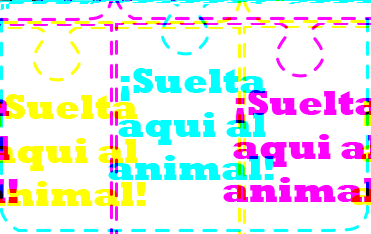
<style>
.page{position:relative;width:371px;height:234px;background:#ffffff}
.page>*{position:absolute;margin:0}
.t1{font:36px "Rockwell-ExtraBold";color:#00ffff}
</style>
<div class="page">
<p class="t1" style="left:108px;top:67px;width:166px;height:112px;text-align:center">¡Suelta aqui al animal!</p>
</div>
